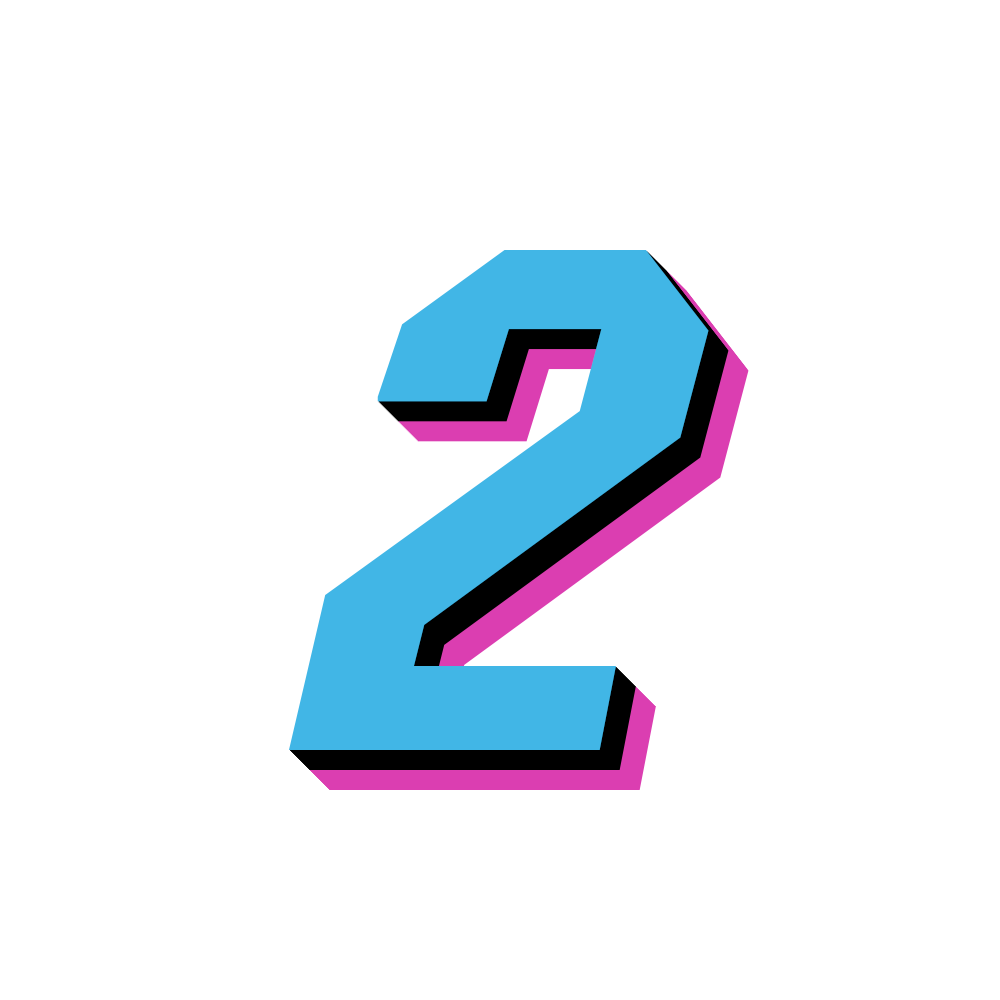
<style>
.page{position:relative;width:1000px;height:1000px;background:#ffffff}
.page>*{position:absolute;margin:0}
.t1{font:625px "NBAHeat";color:#41b6e6}
</style>
<div class="page">
<p class="t1" style="left:289px;top:250px;width:420px;height:500px">2</p>
</div>
